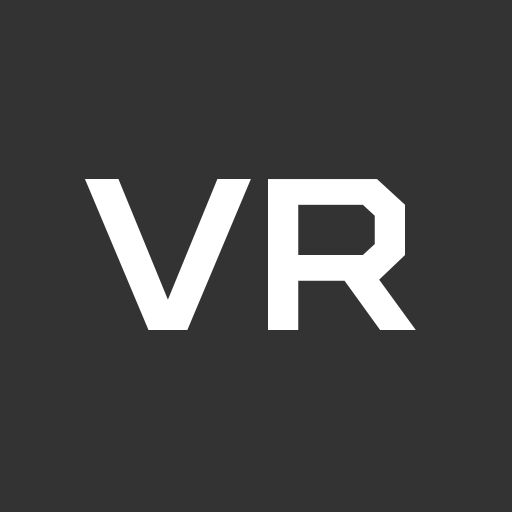
<style>
.page{position:relative;width:512px;height:512px;background:#333333}
.page>*{position:absolute;margin:0}
.t1{font:215.4px "SquaresBold";color:#ffffff}
</style>
<div class="page">
<p class="t1" style="left:85px;top:179px;width:331px;height:151px">VR</p>
</div>
